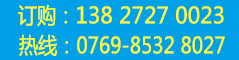
<style>
.page{position:relative;width:239px;height:60px;background:#00a0e9}
.page>*{position:absolute;margin:0}
.t1{font:22.1px "MicrosoftYaHei";color:#fffc29;text-transform:uppercase;scale:0.96 1}
.t2{font:22.1px "MicrosoftYaHei";color:#fffc29;text-transform:uppercase;scale:0.87 1}
</style>
<div class="page">
<p class="t1" style="left:18px;top:4px;width:206px;height:23px"><span class="t2">       订购：</span>138 2727 0023</p>
<p class="t2" style="left:19px;top:34px;width:206px;height:22px">热线：0769-8532 8027</p>
</div>
